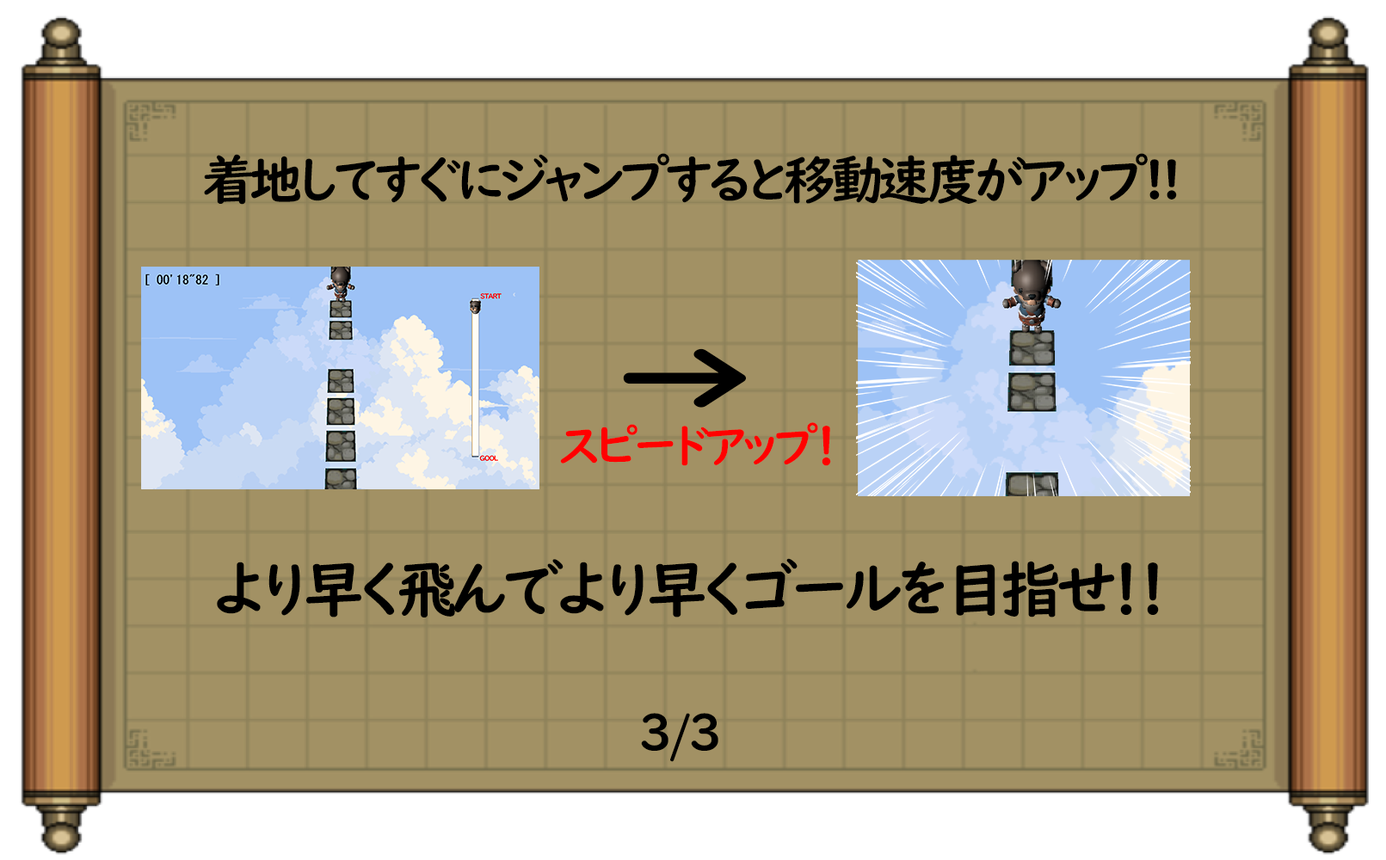
<style>
.page{position:relative;width:1386px;height:860px;background:#a29164}
.page>*{position:absolute;margin:0}
.t1{font:52.8px "UDDigiKyokashoNK-B";letter-spacing:-0.1em;color:#000000}
.t2{font:116.2px "UDDigiKyokashoNK-B";letter-spacing:-0.1em;color:#000000;scale:1.3 1}
.t3{font:47px "UDDigiKyokashoNK-B";letter-spacing:-0.1em;color:#ff0000}
.t4{font:61.9px "UDDigiKyokashoNK-B";letter-spacing:-0.1em;color:#000000}
.t5{font:49.3px "UDDigiKyokashoNK-B";letter-spacing:-0.1em;color:#000000}
</style>
<div class="page">
<p class="t1" style="left:204px;top:153px;width:973px;height:52px">着地してすぐにジャンプすると移動速度がアップ!!</p>
<p class="t2" style="left:623px;top:348px;width:124px;height:60px">→</p>
<p class="t3" style="left:560px;top:422px;width:271px;height:44px">スピードアップ！</p>
<p class="t4" style="left:217px;top:558px;width:942px;height:60px">より早く飛んでより早くゴールを目指せ！！</p>
<p class="t5" style="left:641px;top:713px;width:77px;height:49px">3/3</p>
</div>
